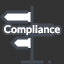
<style>
.page{position:relative;width:64px;height:64px;background:#333333}
.page>*{position:absolute;margin:0}
.t1{font:10.7px "Lato-Bold";color:#ffffff}
</style>
<div class="page">
<p class="t1" style="left:4px;top:25px;width:56px;height:10px">Compliance</p>
</div>
